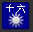
<style>
.page{position:relative;width:33px;height:32px;background:#000090}
.page>*{position:absolute;margin:0}
.t1{font:10.4px "SimSun";color:#ffffff}
</style>
<div class="page">
<p class="t1" style="left:6px;top:4px;width:19px;height:9px">十六</p>
</div>
